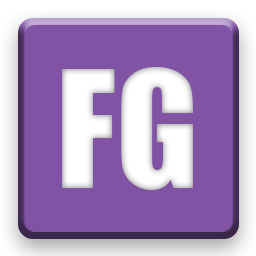
<style>
.page{position:relative;width:256px;height:256px;background:#8153a4}
.page>*{position:absolute;margin:0}
.t1{font:150px "Impact";color:#ffffff}
</style>
<div class="page">
<p class="t1" style="left:62px;top:67px;width:131px;height:123px">FG</p>
</div>
